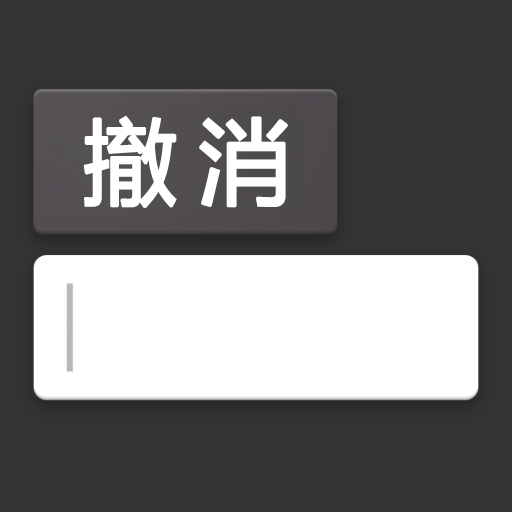
<style>
.page{position:relative;width:512px;height:512px;background:#333333}
.page>*{position:absolute;margin:0}
.t1{font:92px "MicrosoftYaHei";letter-spacing:-0.05em;color:#ffffff;font-weight:bold}
</style>
<div class="page">
<p class="t1" style="left:83px;top:115px;width:205px;height:93px">撤 消</p>
</div>
